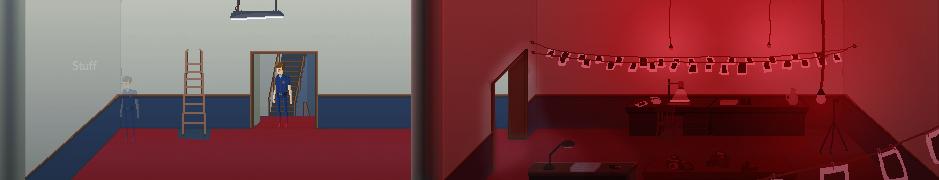
<style>
.page{position:relative;width:939px;height:180px}
.page>*{position:absolute;margin:0}
.t1{font:12px "MyriadHebrew-Regular";color:#b3b8b5}
</style>
<div class="page">
<p class="t1" style="left:72px;top:61px;width:25px;height:9px">Stuff</p>
</div>
